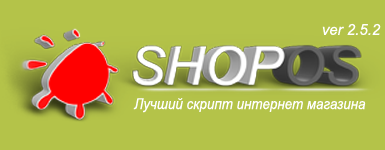
<style>
.page{position:relative;width:385px;height:150px;background:#b4c349}
.page>*{position:absolute;margin:0}
.t1{font:15px "Arial-ItalicMT";color:#ffffff}
.t2{font:15px "Arial-ItalicMT";color:#ffffff;scale:0.89 1}
</style>
<div class="page">
<p class="t1" style="left:322px;top:23px;width:59px;height:12px">ver 2.5.2</p>
<p class="t2" style="left:133px;top:98px;width:233px;height:15px">Лучший скрипт интернет магазина</p>
</div>
